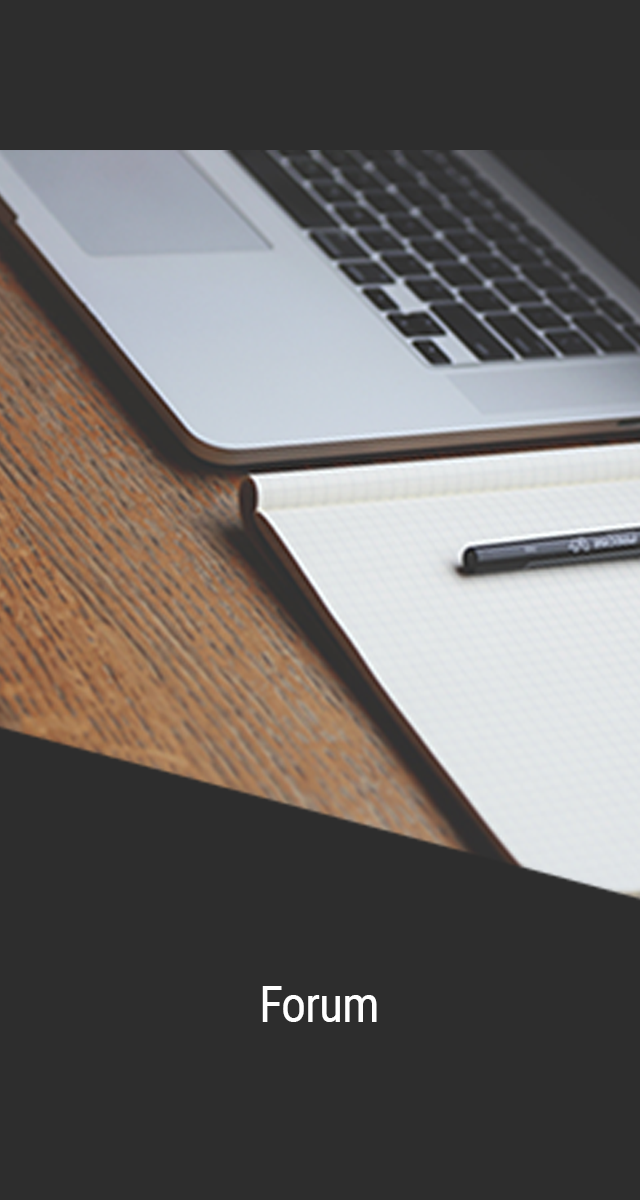
<style>
.page{position:relative;width:640px;height:1200px;background:#2d2d2d}
.page>*{position:absolute;margin:0}
.t1{font:50px "RobotoCondensed-Regular";letter-spacing:-0.025em;color:#ffffff}
</style>
<div class="page">
<p class="t1" style="left:262px;top:986px;width:115px;height:36px">Forum</p>
</div>
